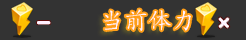
<style>
.page{position:relative;width:246px;height:40px;background:#333333}
.page>*{position:absolute;margin:0}
.t1{font:24px "¿¬Ìå";color:#fff0ff}
</style>
<div class="page">
<p class="t1" style="left:104px;top:9px;width:87px;height:22px">当前体力</p>
</div>
